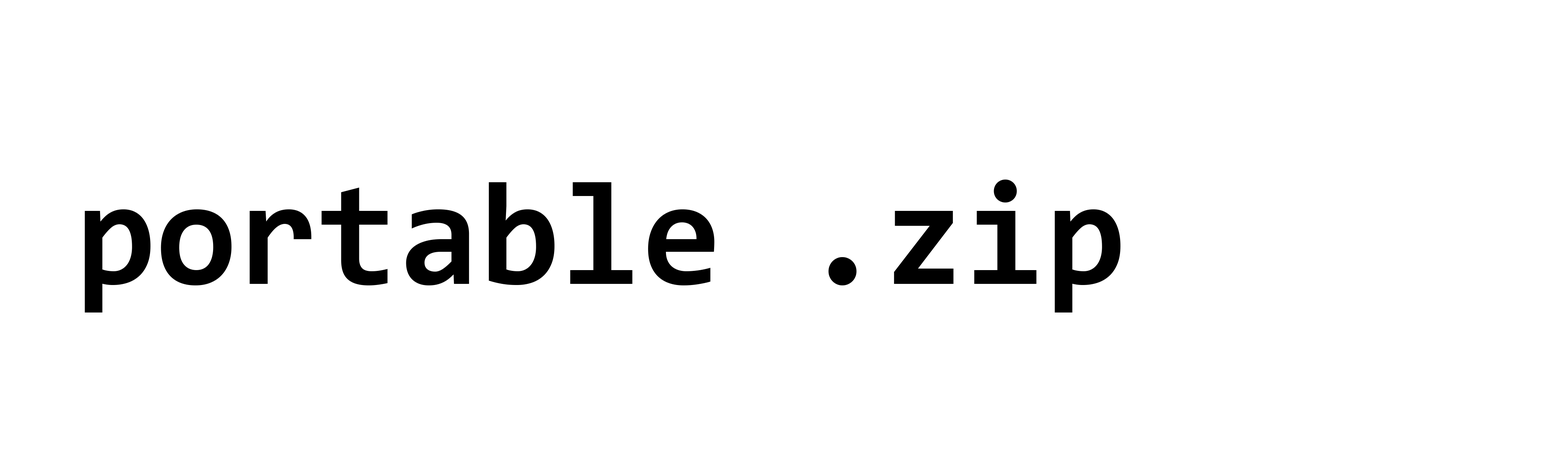
<style>
.page{position:relative;width:1568px;height:468px;background:#ffffff}
.page>*{position:absolute;margin:0}
.t1{font:147px "Consolas-Bold";color:#000000}
</style>
<div class="page">
<p class="t1" style="left:85px;top:179px;width:1035px;height:133px">portable .zip</p>
</div>
